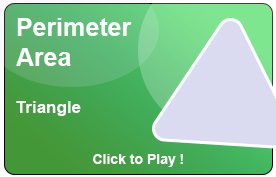
<style>
.page{position:relative;width:276px;height:177px}
.page>*{position:absolute;margin:0}
.t1{font:25px "Arial-BoldMT";color:#ffffff}
.t2{font:17px "Arial-BoldMT";color:#ffffff}
.t3{font:14px "Arial-BoldMT";color:#ffffff}
</style>
<div class="page">
<p class="t1" style="left:16px;top:18px;width:116px;height:48px">Perimeter <br>Area</p>
<p class="t2" style="left:16px;top:101px;width:65px;height:15px">Triangle</p>
<p class="t3" style="left:93px;top:154px;width:90px;height:13px">Click to Play !</p>
</div>
